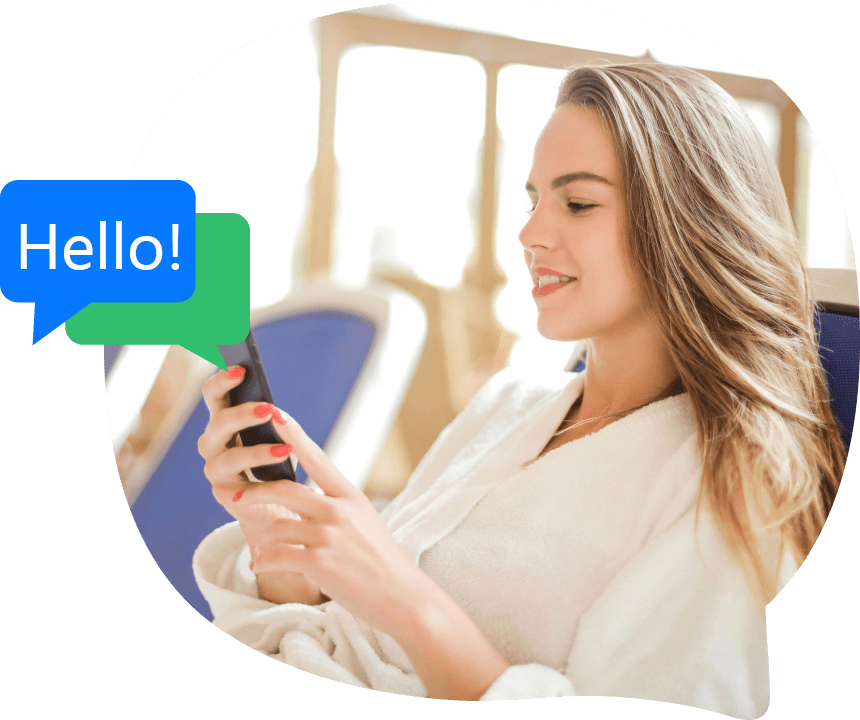
<style>
.page{position:relative;width:860px;height:720px;background:#ffffff}
.page>*{position:absolute;margin:0}
.t1{font:60px "MicrosoftYaHei";color:#fefefe}
</style>
<div class="page">
<p class="t1" style="left:20px;top:221px;width:160px;height:49px">Hello!</p>
</div>
